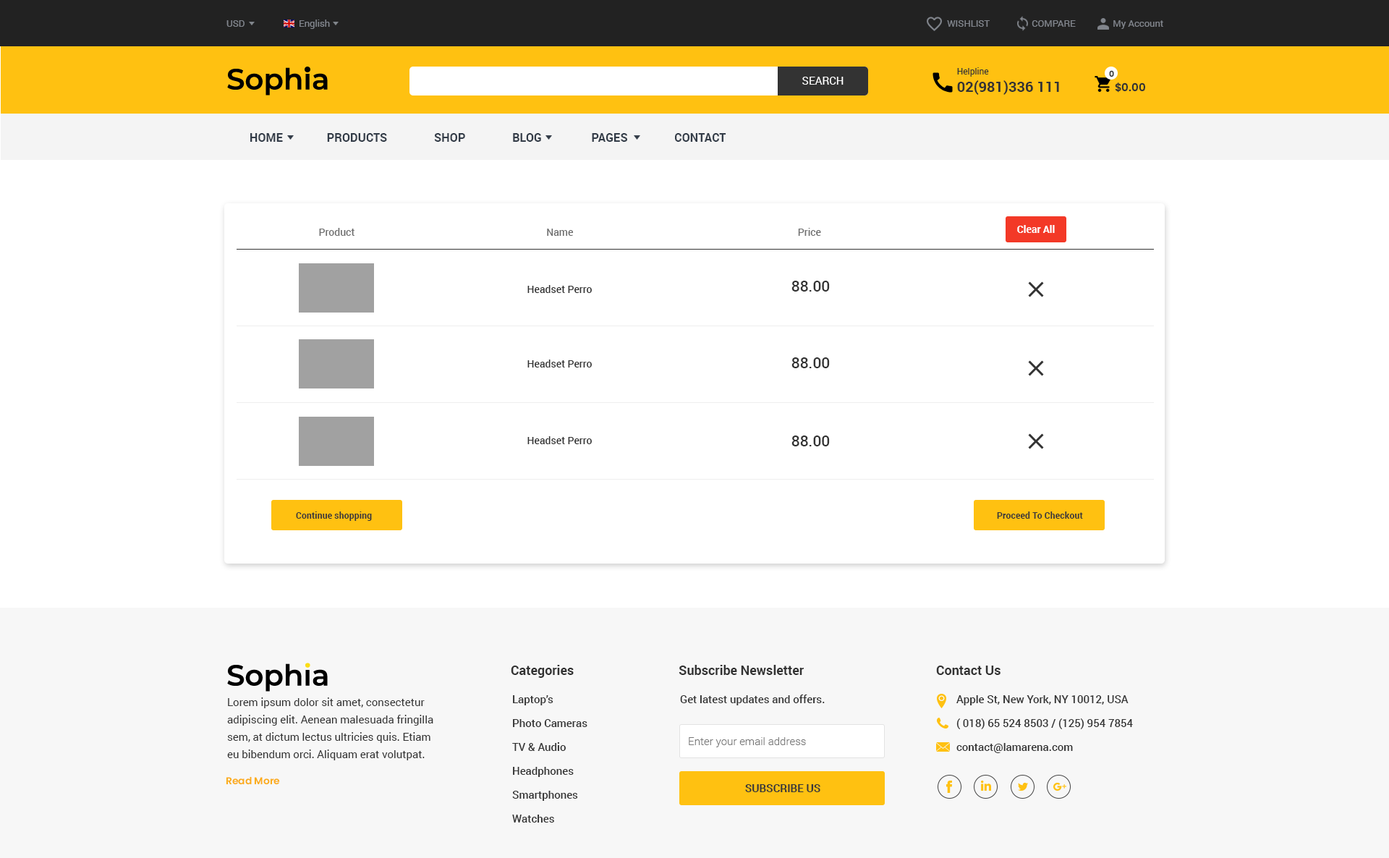
<style>
.page{position:relative;width:1389px;height:858px;background:#ffffff}
.page>*{position:absolute;margin:0}
.t1{font:9.4px "Roboto-Regular";color:#81858c}
.t2{font:10.9px "Roboto-Regular";color:#ffffff}
.t3{font:14.5px "Roboto-Bold";color:#333333}
.t4{font:8.7px "Roboto-Regular";color:#333333}
.t5{font:8px "Poppins-SemiBold";color:#333333}
.t6{font:10.9px "Poppins-SemiBold";color:#333333}
.t7{font:11.6px "Roboto-Bold";color:#333c48}
.t8{font:10.1px "Roboto-Medium";color:#6f6f6f}
.t9{font:10.1px "Roboto-Bold";color:#fefefe}
.t10{font:15.2px "Roboto-Medium";color:#333333}
.t11{font:10.1px "Roboto-Medium";color:#333333}
.t12{font:8.7px "Roboto-Bold";color:#383838;scale:1.03 1}
.t13{font:13px "Roboto-Bold";color:#333333}
.t14{font:10.9px/17.4px "Roboto-Regular";color:#333333}
.t15{font:10.9px/23.9px "Roboto-Medium";color:#333333}
.t16{font:10.9px "Roboto-Medium";color:#333333}
.t17{font:10.9px "Roboto-Light";color:#777777}
.t18{font:9.8px "Poppins-SemiBold";color:#fbad1a}
.t19{font:10.9px "Roboto-Bold";color:#383838}
</style>
<div class="page">
<p class="t1" style="left:227px;top:20px;width:18px;height:7px">USD</p>
<p class="t1" style="left:300px;top:20px;width:30px;height:9px">English</p>
<p class="t1" style="left:947px;top:20px;width:217px;height:9px">WISHLIST                  COMPARE                My Account</p>
<p class="t2" style="left:803px;top:77px;width:41px;height:8px">SEARCH</p>
<p class="t3" style="left:957px;top:67px;width:102px;height:28px"><span class="t4">Helpline<br></span>02(981)336 111</p>
<p class="t5" style="left:1109px;top:70px;width:5px;height:7px">0</p>
<p class="t6" style="left:1115px;top:82px;width:31px;height:11px">$0.00</p>
<p class="t7" style="left:250px;top:133px;width:477px;height:9px">HOME               PRODUCTS                SHOP                BLOG                 PAGES                CONTACT</p>
<p class="t8" style="left:319px;top:228px;width:502px;height:8px">Product                                                                            Name                                                                                         Price</p>
<p class="t9" style="left:1017px;top:225px;width:38px;height:8px">Clear All</p>
<p class="t10" style="left:792px;top:281px;width:38px;height:11px">88.00</p>
<p class="t8" style="left:528px;top:285px;width:64px;height:8px;text-align:center"><span class="t11">Headset Perro<br></span>class="product-name"&gt;Headset Perro&lt;/a&gt;</p>
<p class="t8" style="left:528px;top:360px;width:64px;height:8px;text-align:center"><span class="t11">Headset Perro<br></span>class="product-name"&gt;Headset Perro&lt;/a&gt;</p>
<p class="t10" style="left:792px;top:357px;width:38px;height:11px">88.00</p>
<p class="t8" style="left:528px;top:436px;width:64px;height:8px;text-align:center"><span class="t11">Headset Perro<br></span>class="product-name"&gt;Headset Perro&lt;/a&gt;</p>
<p class="t10" style="left:792px;top:436px;width:38px;height:10px">88.00</p>
<p class="t12" style="left:296px;top:512px;width:76px;height:9px">Continue shopping</p>
<p class="t12" style="left:997px;top:512px;width:86px;height:7px">Proceed To Checkout</p>
<p class="t13" style="left:511px;top:665px;width:63px;height:13px">Categories</p>
<p class="t13" style="left:679px;top:665px;width:125px;height:10px">Subscribe Newsletter</p>
<p class="t13" style="left:936px;top:666px;width:65px;height:9px">Contact Us</p>
<p class="t14" style="left:227px;top:698px;width:206px;height:63px">Lorem ipsum dolor sit amet, consectetur adipiscing elit. Aenean malesuada fringilla sem, at dictum lectus ultricies quis. Etiam eu bibendum orci. Aliquam erat volutpat.</p>
<p class="t15" style="left:512px;top:695px;width:76px;height:128px">Laptop’s<br>Photo Cameras<br>TV &amp; Audio<br>Headphones<br>Smartphones<br>Watches</p>
<p class="t16" style="left:680px;top:695px;width:145px;height:11px">Get latest updates and offers.</p>
<p class="t15" style="left:957px;top:695px;width:176px;height:58px">Apple St, New York, NY 10012, USA<br>( 018) 65 524 8503 / (125) 954 7854<br>contact@lamarena.com</p>
<p class="t17" style="left:689px;top:737px;width:117px;height:11px">Enter your email address</p>
<p class="t18" style="left:226px;top:776px;width:54px;height:9px">Read More</p>
<p class="t19" style="left:745px;top:784px;width:76px;height:8px">SUBSCRIBE US</p>
</div>
